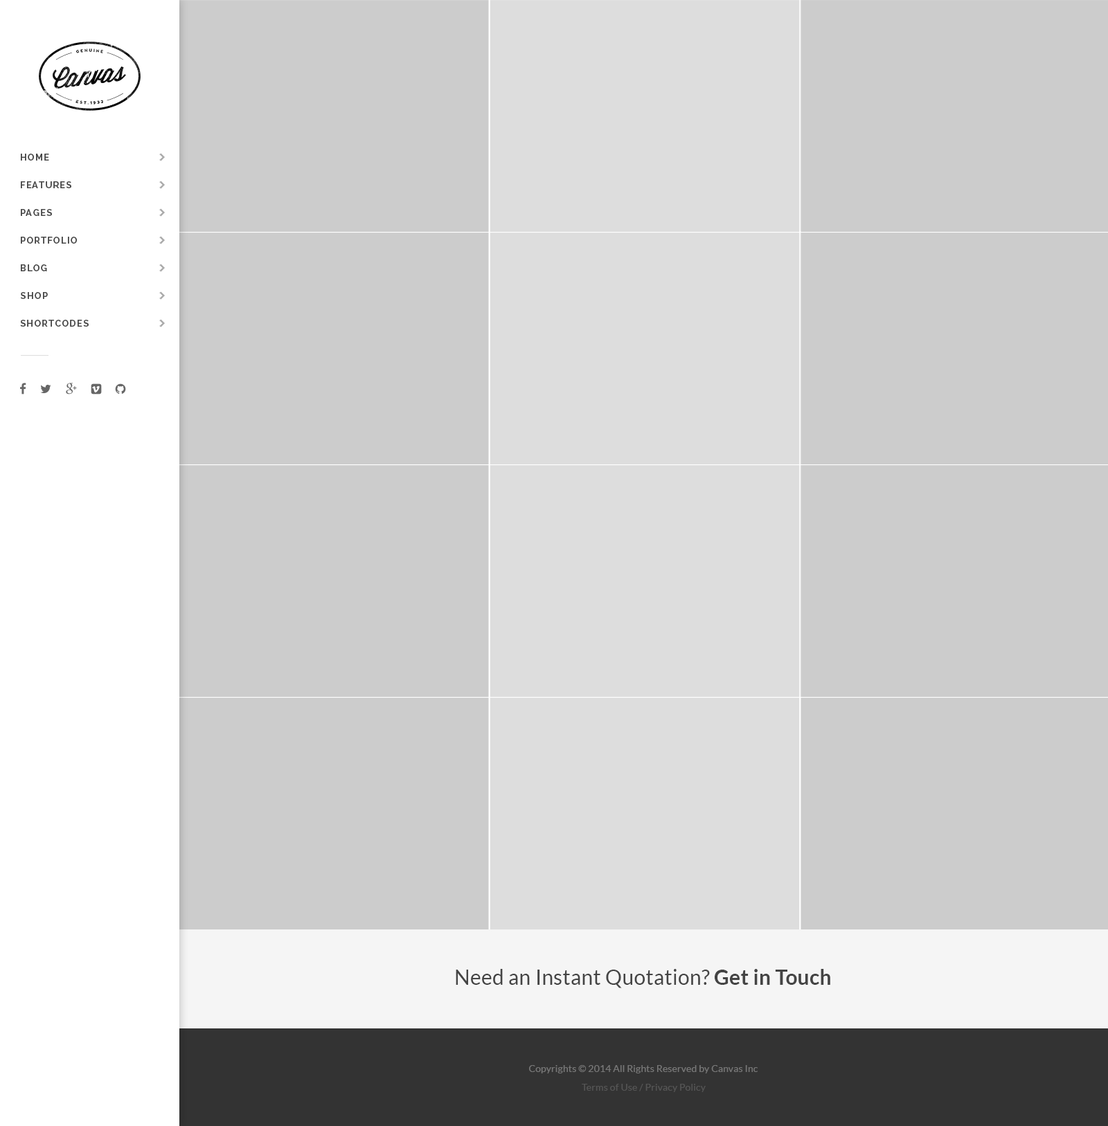
<style>
.page{position:relative;width:1108px;height:1126px;background:#cccccc}
.page>*{position:absolute;margin:0}
.t1{font:9px "Raleway-Bold";letter-spacing:0.1em;color:#444444}
.t2{font:20.8px "Lato-Regular";letter-spacing:0.01em;color:#444444}
.t3{font:20.8px "Lato-Bold";letter-spacing:0.01em;color:#444444}
.t4{font:9.7px "Lato-Regular";letter-spacing:0.01em;color:#777777}
.t5{font:9.7px "Lato-Regular";letter-spacing:0.01em;color:#555555}
</style>
<div class="page">
<p class="t1" style="left:21px;top:154px;width:28px;height:7px">HOME</p>
<p class="t1" style="left:21px;top:181px;width:50px;height:7px">FEATURES</p>
<p class="t1" style="left:21px;top:209px;width:31px;height:7px">PAGES</p>
<p class="t1" style="left:21px;top:237px;width:56px;height:7px">PORTFOLIO</p>
<p class="t1" style="left:21px;top:264px;width:26px;height:7px">BLOG</p>
<p class="t1" style="left:21px;top:292px;width:27px;height:7px">SHOP</p>
<p class="t1" style="left:20px;top:320px;width:69px;height:7px">SHORTCODES</p>
<p class="t2" style="left:456px;top:969px;width:374px;height:20px">Need an Instant Quotation? <span class="t3">Get in Touch</span></p>
<p class="t4" style="left:529px;top:1065px;width:228px;height:9px">Copyrights © 2014 All Rights Reserved by Canvas Inc</p>
<p class="t5" style="left:582px;top:1084px;width:123px;height:8px">Terms of Use / Privacy Policy</p>
</div>
